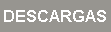
<style>
.page{position:relative;width:111px;height:32px;background:#979590}
.page>*{position:absolute;margin:0}
.t1{font:17px "Arial-BoldMT";color:#ffffff}
</style>
<div class="page">
<p class="t1" style="left:4px;top:10px;width:102px;height:12px">DESCARGAS</p>
</div>
